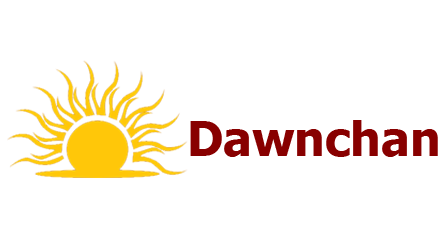
<style>
.page{position:relative;width:448px;height:240px;background:#ffffff}
.page>*{position:absolute;margin:0}
.t1{font:48px "Tahoma-Bold";color:#880000}
</style>
<div class="page">
<p class="t1" style="left:190px;top:120px;width:248px;height:37px">Dawnchan</p>
</div>
